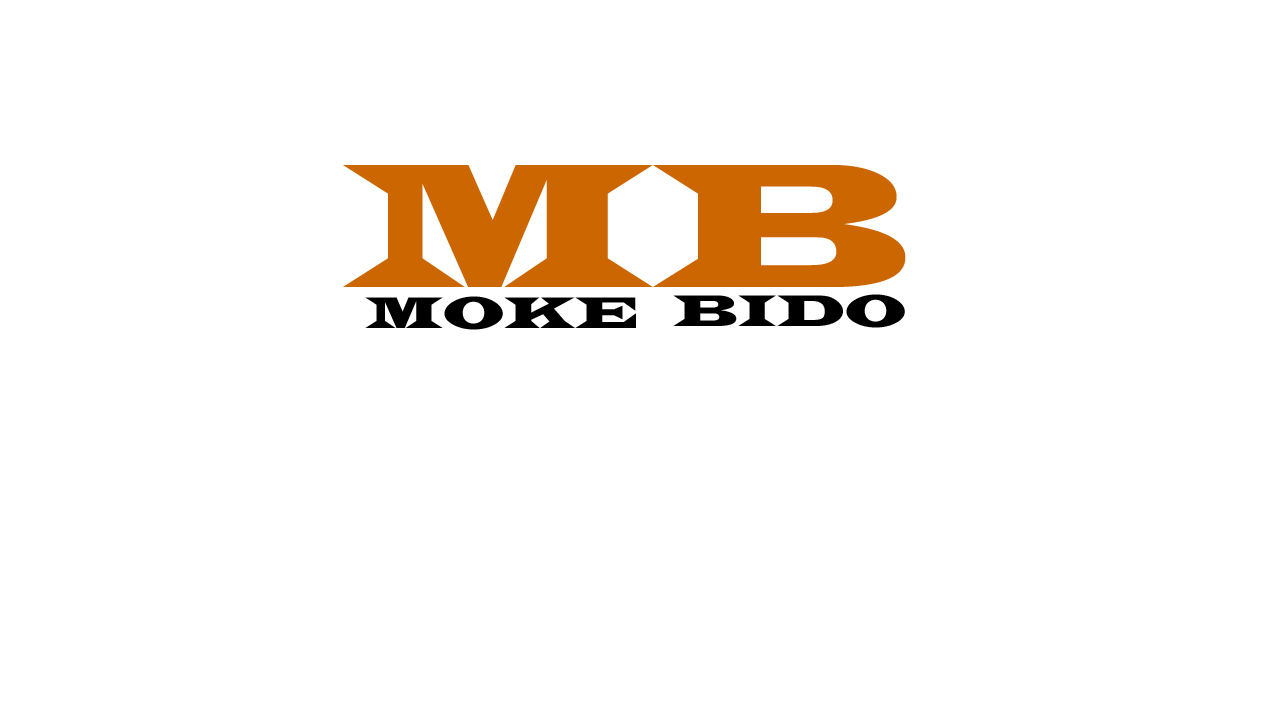
<style>
.page{position:relative;width:1280px;height:720px;background:#ffffff}
.page>*{position:absolute;margin:0}
.t1{font:45.7px "LatinWide";color:#000000}
</style>
<div class="page">
<p class="t1" style="left:673px;top:294px;width:232px;height:34px">BIDO</p>
<p class="t1" style="left:365px;top:296px;width:271px;height:34px">MOKE</p>
</div>
